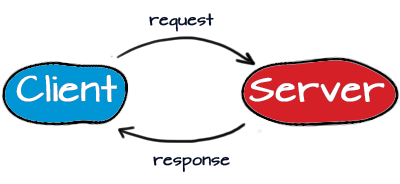
<style>
.page{position:relative;width:400px;height:184px;background:#ffffff}
.page>*{position:absolute;margin:0}
.t1{font:13.9px "ArchitectsDaughter";color:#070f26;font-weight:bold}
.t2{font:31.2px "ArchitectsDaughter";color:#ffffff;font-weight:bold}
</style>
<div class="page">
<p class="t1" style="left:149px;top:13px;width:65px;height:19px">request</p>
<p class="t2" style="left:16px;top:75px;width:101px;height:27px">Client</p>
<p class="t2" style="left:16px;top:75px;width:101px;height:27px">Client</p>
<p class="t2" style="left:249px;top:77px;width:136px;height:25px">Server</p>
<p class="t2" style="left:249px;top:77px;width:136px;height:25px">Server</p>
<p class="t1" style="left:153px;top:156px;width:77px;height:16px">response</p>
</div>
